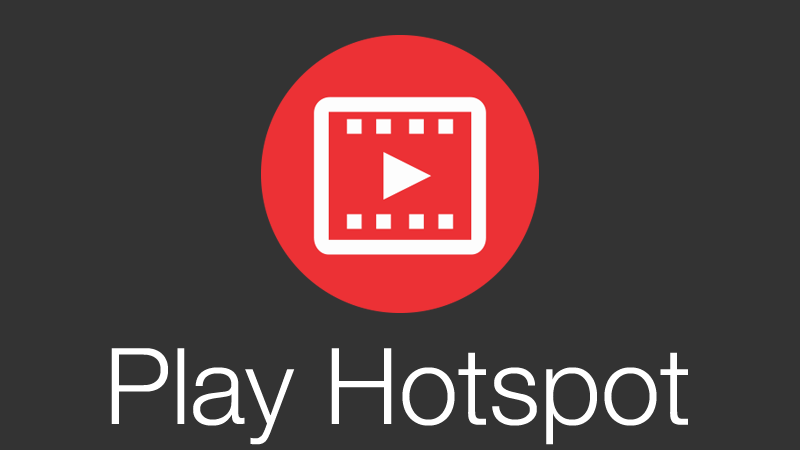
<style>
.page{position:relative;width:800px;height:450px;background:#333333}
.page>*{position:absolute;margin:0}
.t1{font:106.2px "HelveticaNeueLTCom-Lt";color:#ffffff}
</style>
<div class="page">
<p class="t1" style="left:111px;top:348px;width:577px;height:97px">Play Hotspot</p>
</div>
